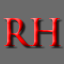
<style>
.page{position:relative;width:64px;height:64px;background:#6b6b6b}
.page>*{position:absolute;margin:0}
.t1{font:36px "TrajanPro-Bold"}
</style>
<div class="page">
<p class="t1" style="left:3px;top:18px;width:58px;height:28px">RH</p>
</div>
